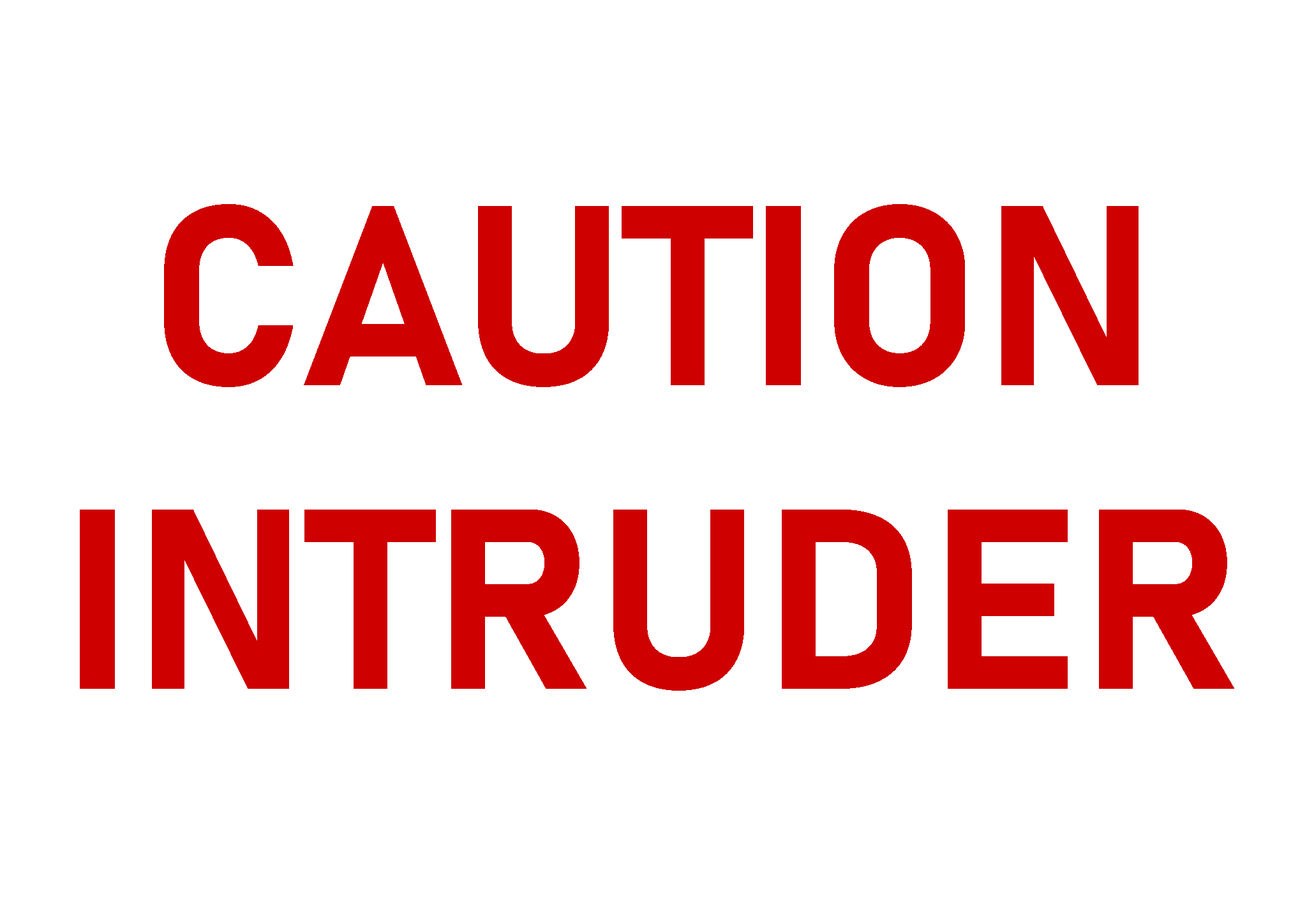
<style>
.page{position:relative;width:1307px;height:912px;background:#ffffff}
.page>*{position:absolute;margin:0}
.t1{font:253px "Bahnschrift-Bold";color:#ce0000}
</style>
<div class="page">
<p class="t1" style="left:80px;top:204px;width:1154px;height:487px;text-align:center">CAUTION<br>INTRUDER</p>
</div>
